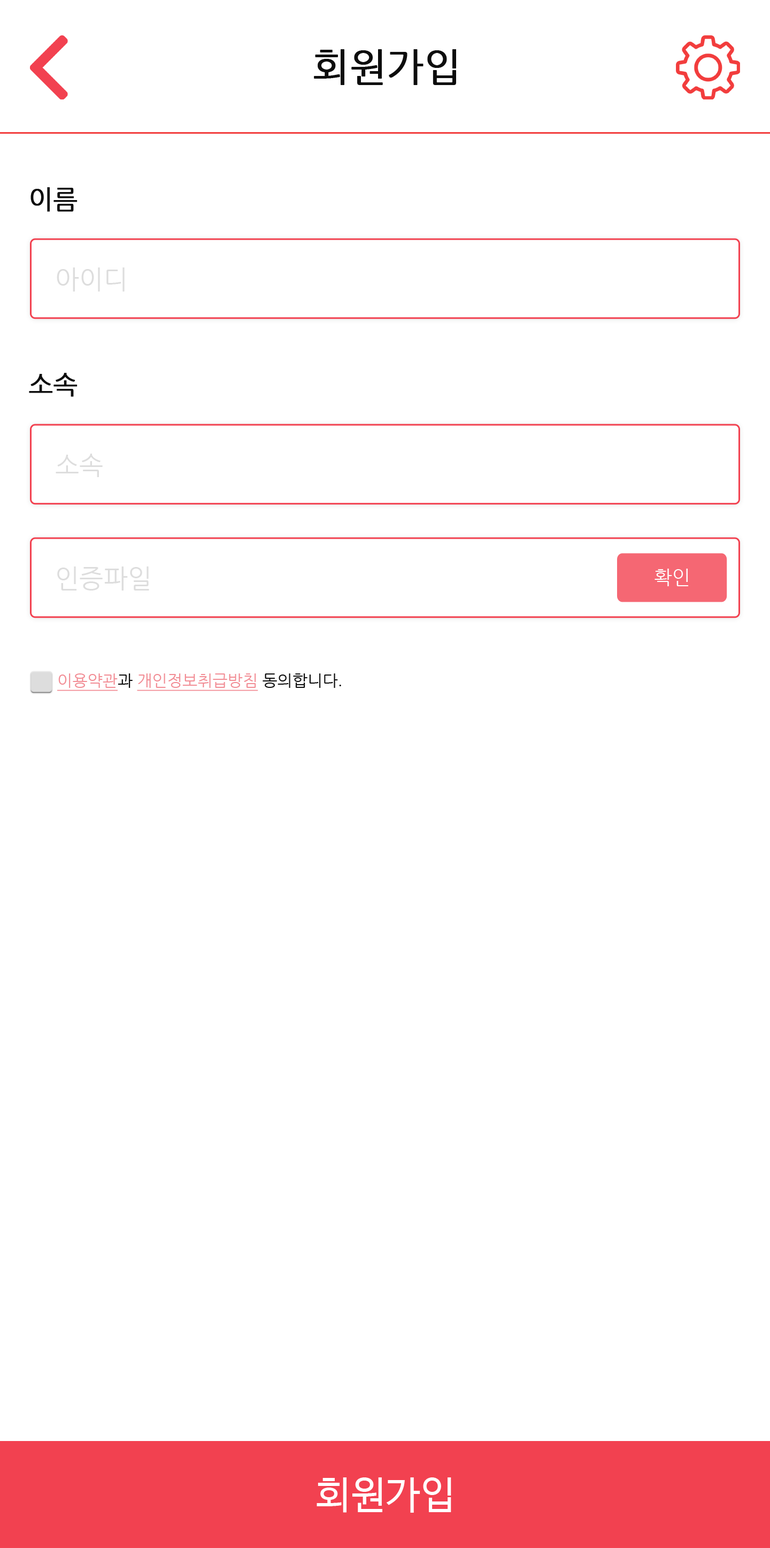
<style>
.page{position:relative;width:770px;height:1548px;background:#ffffff}
.page>*{position:absolute;margin:0}
.t1{font:38.5px "NanumGothic";color:#0d0d0d;font-weight:bold}
.t2{font:25.7px "NanumGothic";color:#0d0d0d;font-weight:bold}
.t3{font:25.7px "NanumGothic";color:#dddddd}
.t4{font:19.3px "NanumGothic";color:#ffffff}
.t5{font:16px "NanumGothic";color:#f28d95;text-decoration:underline}
.t6{font:16px "NanumGothic";color:#0d0d0d}
.t7{font:38.5px "NanumBarunGothic";letter-spacing:0.02em;color:#ffffff}
</style>
<div class="page">
<p class="t1" style="left:314px;top:49px;width:142px;height:36px">회원가입</p>
<p class="t2" style="left:30px;top:187px;width:48px;height:25px">이름</p>
<p class="t3" style="left:57px;top:267px;width:68px;height:25px">아이디</p>
<p class="t2" style="left:29px;top:373px;width:49px;height:24px">소속</p>
<p class="t3" style="left:56px;top:454px;width:47px;height:23px">소속</p>
<p class="t3" style="left:57px;top:566px;width:92px;height:25px">인증파일</p>
<p class="t4" style="left:655px;top:569px;width:34px;height:17px">확인</p>
<p class="t5" style="left:57px;top:673px;width:284px;height:18px">이용약관<span class="t6">과 </span>개인정보취급방침<span class="t6"> 동의합니다.</span></p>
<p class="t7" style="left:317px;top:1477px;width:134px;height:36px">회원가입</p>
</div>
